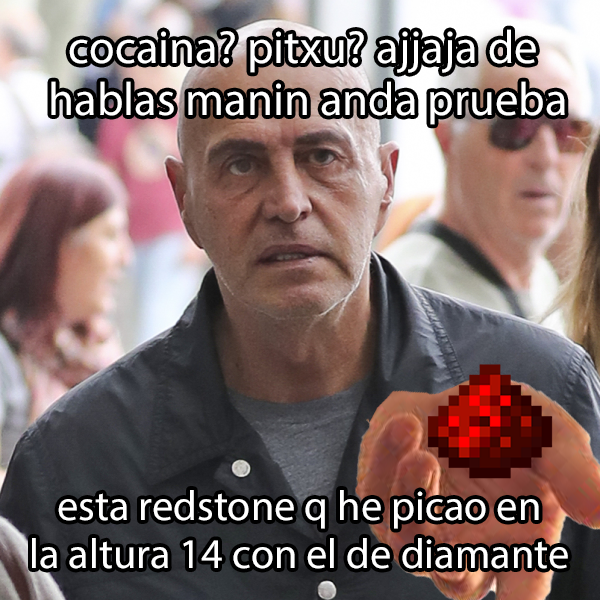
<style>
.page{position:relative;width:600px;height:600px}
.page>*{position:absolute;margin:0}
.t1{font:46.8px "MyriadPro-Regular";color:#ffffff}
.t2{font:42.4px "MyriadPro-Regular";color:#ffffff}
</style>
<div class="page">
<p class="t1" style="left:51px;top:29px;width:514px;height:96px;text-align:center">cocaina? pitxu? ajjaja de <br>hablas manin anda prueba</p>
<p class="t2" style="left:32px;top:490px;width:536px;height:79px;text-align:center">esta redstone q he picao en<br>la altura 14 con el de diamante</p>
</div>
